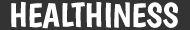
<style>
.page{position:relative;width:190px;height:30px;background:#333333}
.page>*{position:absolute;margin:0}
.t1{font:34px "Boogaloo-Regular";color:#ffffff}
</style>
<div class="page">
<p class="t1" style="left:11px;top:1px;width:167px;height:28px">HEALTHINESS</p>
</div>
